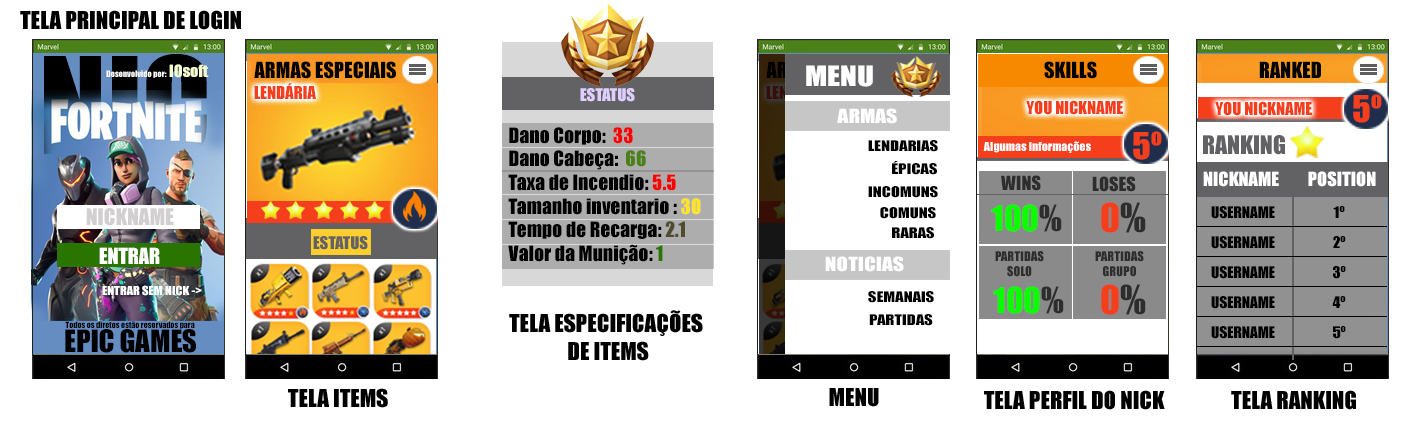
<style>
.page{position:relative;width:1417px;height:422px;background:#ffffff}
.page>*{position:absolute;margin:0}
.t1{font:22.8px "Impact";color:#000000}
.t2{font:15.5px "Impact";color:#f6ffd2;scale:1.04 1}
.t3{font:20.4px "Impact";color:#000000}
.t4{font:26.1px "Impact";color:#ffffff;scale:1.19 1}
.t5{font:8.2px "Impact";color:#ffffff}
.t6{font:16.4px "Impact";color:#f53e1c}
.t7{font:16.3px "Impact";color:#dfcfff}
.t8{font:34.3px "Impact";color:#f53e1c}
.t9{font:17.9px "Impact";color:#ffffff;scale:1.19 1}
.t10{font:19.7px "Impact";color:#000000}
.t11{font:19.7px "Impact";color:#ff0000}
.t12{font:19.7px "Impact";color:#4c8018}
.t13{font:19.7px "Impact";color:#ffe42d}
.t14{font:19.7px "Impact";color:#504c2e}
.t15{font:19.7px "Impact";color:#297500}
.t16{font:23.7px "Impact";color:#626164}
.t17{font:13.9px "Impact";color:#000000;scale:1.19 1}
.t18{font:11.4px "Impact";color:#ffffff;scale:1.04 1}
.t19{font:17.9px "Impact";color:#ffffff;scale:1.03 1}
.t20{font:17.9px "Impact";color:#2d2d2e;scale:1.03 1}
.t21{font:21.2px "Impact";color:#d1cfcf}
.t22{font:32.6px "Impact";color:#0cff00}
.t23{font:32.6px "Impact";color:#2d2d2e}
.t24{font:36.7px "Impact";color:#f53e1c}
.t25{font:36.7px "Impact";color:#2d2d2e}
.t26{font:14.7px "Impact";color:#000000;scale:1.04 1}
.t27{font:16.3px "Impact";color:#626164}
.t28{font:20.4px "Impact";color:#ffffff}
.t29{font:12.4px "Impact";color:#2d2d2e}
.t30{font:11.4px "Impact";color:#ffffff;scale:1.1 1}
.t31{font:28.6px "Impact";color:#000000}
.t32{font:8px "Impact";color:#000000}
</style>
<div class="page">
<p class="t1" style="left:20px;top:10px;width:221px;height:20px">TELA PRINCIPAL DE LOGIN</p>
<p class="t2" style="left:169px;top:64px;width:40px;height:14px">IOsoft</p>
<p class="t3" style="left:254px;top:61px;width:142px;height:18px">ARMAS ESPECIAIS</p>
<p class="t4" style="left:806px;top:65px;width:67px;height:22px">MENU</p>
<p class="t3" style="left:1044px;top:61px;width:53px;height:18px">SKILLS</p>
<p class="t3" style="left:1259px;top:61px;width:62px;height:17px">RANKED</p>
<p class="t5" style="left:106px;top:70px;width:61px;height:8px">Desenvolvido por:</p>
<p class="t6" style="left:254px;top:83px;width:62px;height:16px">LENDÁRIA</p>
<p class="t7" style="left:580px;top:88px;width:55px;height:14px">ESTATUS</p>
<p class="t6" style="left:1026px;top:100px;width:97px;height:15px">YOU NICKNAME</p>
<p class="t6" style="left:1215px;top:101px;width:97px;height:15px">YOU NICKNAME</p>
<p class="t8" style="left:1353px;top:94px;width:29px;height:29px">5º</p>
<p class="t9" style="left:837px;top:108px;width:60px;height:16px">ARMAS</p>
<p class="t10" style="left:508px;top:127px;width:193px;height:138px">Dano Corpo:  <span class="t11">33<br></span>Dano Cabeça:  <span class="t12">66<br></span>Taxa de Incendio: <span class="t11">5.5<br></span>Tamanho inventario : <span class="t13">30<br></span>Tempo de Recarga: <span class="t14">2.1<br></span>Valor da Munição: <span class="t15">1</span></p>
<p class="t8" style="left:1133px;top:131px;width:29px;height:29px">5º</p>
<p class="t16" style="left:1203px;top:135px;width:82px;height:20px">RANKING</p>
<p class="t17" style="left:868px;top:140px;width:70px;height:12px">LENDARIAS</p>
<p class="t18" style="left:983px;top:141px;width:108px;height:12px">Algumas Informações</p>
<p class="t17" style="left:892px;top:161px;width:45px;height:14px">ÉPICAS</p>
<p class="t19" style="left:1203px;top:171px;width:76px;height:16px">NICKNAME</p>
<p class="t19" style="left:1308px;top:171px;width:68px;height:16px">POSITION</p>
<p class="t20" style="left:1001px;top:175px;width:40px;height:16px">WINS</p>
<p class="t20" style="left:1092px;top:176px;width:44px;height:16px">LOSES</p>
<p class="t17" style="left:868px;top:186px;width:70px;height:12px">INCOMUNS</p>
<p class="t21" style="left:86px;top:208px;width:88px;height:18px">NICKNAME</p>
<p class="t17" style="left:880px;top:207px;width:56px;height:12px">COMUNS</p>
<p class="t22" style="left:991px;top:204px;width:71px;height:28px">100<span class="t23">%</span></p>
<p class="t24" style="left:1101px;top:202px;width:45px;height:31px">0<span class="t25">%</span></p>
<p class="t26" style="left:1211px;top:206px;width:64px;height:13px">USERNAME</p>
<p class="t26" style="left:1333px;top:206px;width:12px;height:12px">1º</p>
<p class="t17" style="left:892px;top:227px;width:42px;height:12px">RARAS</p>
<p class="t27" style="left:313px;top:236px;width:55px;height:14px">ESTATUS</p>
<p class="t26" style="left:1211px;top:236px;width:64px;height:13px">USERNAME</p>
<p class="t26" style="left:1333px;top:236px;width:13px;height:12px">2º</p>
<p class="t28" style="left:99px;top:247px;width:61px;height:17px">ENTRAR</p>
<p class="t9" style="left:825px;top:256px;width:79px;height:16px">NOTICIAS</p>
<p class="t29" style="left:995px;top:251px;width:49px;height:26px;text-align:center">PARTIDAS<br>SOLO</p>
<p class="t29" style="left:1095px;top:251px;width:49px;height:26px;text-align:center">PARTIDAS<br>GRUPO</p>
<p class="t26" style="left:1211px;top:266px;width:64px;height:13px">USERNAME</p>
<p class="t26" style="left:1333px;top:266px;width:13px;height:13px">3º</p>
<p class="t30" style="left:102px;top:285px;width:100px;height:11px">ENTRAR SEM NICK -&gt;</p>
<p class="t17" style="left:868px;top:291px;width:66px;height:12px">SEMANAIS</p>
<p class="t22" style="left:993px;top:286px;width:71px;height:28px">100<span class="t23">%</span></p>
<p class="t24" style="left:1101px;top:284px;width:45px;height:31px">0<span class="t25">%</span></p>
<p class="t26" style="left:1211px;top:296px;width:64px;height:13px">USERNAME</p>
<p class="t26" style="left:1332px;top:296px;width:14px;height:12px">4º</p>
<p class="t1" style="left:509px;top:310px;width:194px;height:51px;text-align:center">TELA ESPECIFICAÇÕES <br>DE ITEMS</p>
<p class="t17" style="left:869px;top:314px;width:64px;height:12px">PARTIDAS</p>
<p class="t31" style="left:65px;top:329px;width:131px;height:24px">EPIC GAMES</p>
<p class="t32" style="left:65px;top:321px;width:130px;height:8px">Todos os diretos estão reservados para</p>
<p class="t26" style="left:1211px;top:326px;width:64px;height:13px">USERNAME</p>
<p class="t26" style="left:1333px;top:326px;width:13px;height:13px">5º</p>
<p class="t1" style="left:288px;top:388px;width:100px;height:20px">TELA ITEMS</p>
<p class="t1" style="left:829px;top:388px;width:50px;height:19px">MENU</p>
<p class="t1" style="left:984px;top:390px;width:181px;height:20px">TELA PERFIL DO NICK</p>
<p class="t1" style="left:1231px;top:390px;width:125px;height:20px">TELA RANKING</p>
</div>
